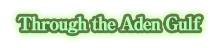
<style>
.page{position:relative;width:218px;height:48px;background:#ffffff}
.page>*{position:absolute;margin:0}
.t1{font:18px "RyuminPro-ExBold";letter-spacing:-0.08em;color:#b3ffb5;font-weight:bold}
</style>
<div class="page">
<p class="t1" style="left:18px;top:16px;width:183px;height:18px">Through the Aden Gulf</p>
</div>
